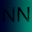
<style>
.page{position:relative;width:32px;height:32px}
.page>*{position:absolute;margin:0}
.t1{font:20.8px "ArialMT";color:#000000}
</style>
<div class="page">
<p class="t1" style="left:2px;top:7px;width:28px;height:15px">NN</p>
</div>
